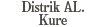
<style>
.page{position:relative;width:103px;height:27px;background:#ffffff}
.page>*{position:absolute;margin:0}
.t1{font:14px/13px "RyuminPro-ExBold";letter-spacing:-0.04em;color:#4c4843;scale:0.9 1}
</style>
<div class="page">
<p class="t1" style="left:21px;top:1px;width:63px;height:24px;text-align:center">Distrik AL.<br>Kure</p>
</div>
